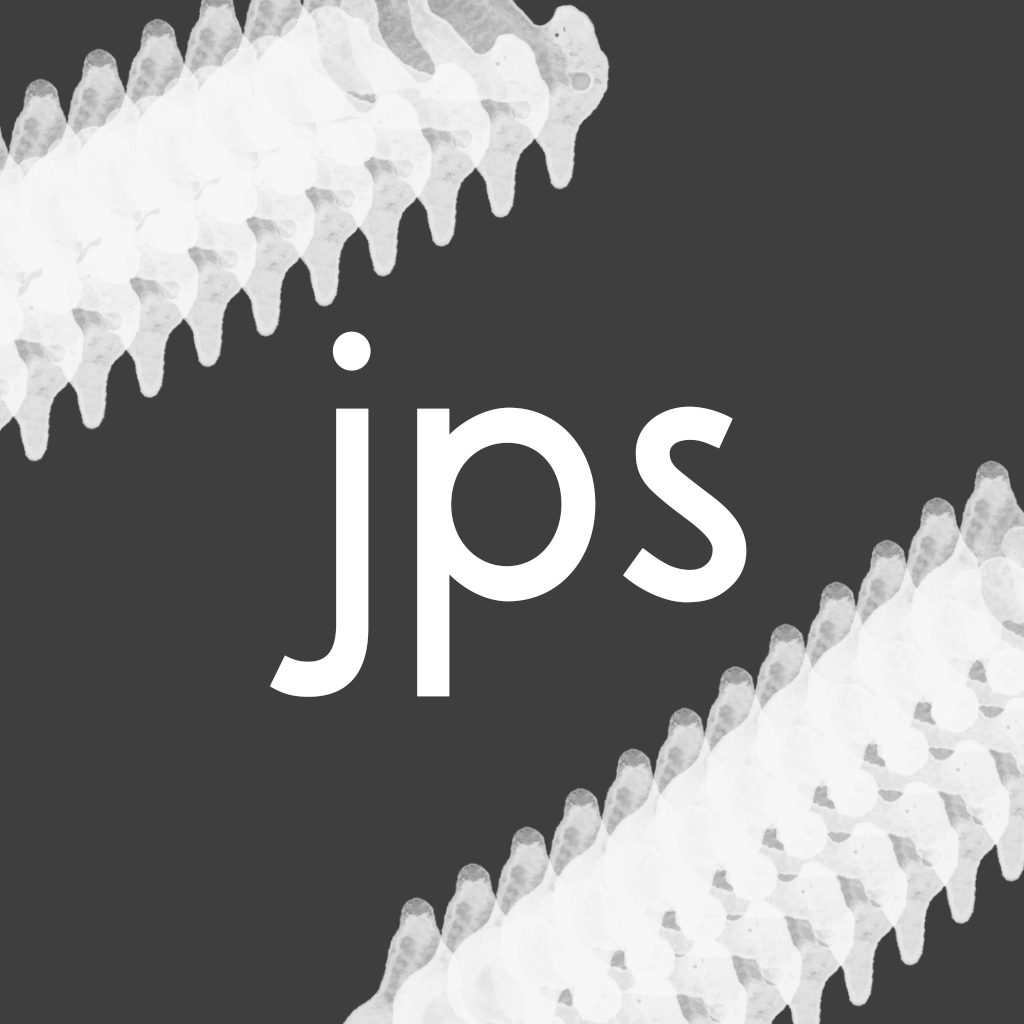
<style>
.page{position:relative;width:1024px;height:1024px;background:#3e3e3e}
.page>*{position:absolute;margin:0}
.t1{font:382.7px "APompadourSample";color:#ffffff;font-weight:bold;scale:0.97 1}
</style>
<div class="page">
<p class="t1" style="left:269px;top:331px;width:478px;height:366px">jps</p>
</div>
